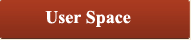
<style>
.page{position:relative;width:191px;height:40px}
.page>*{position:absolute;margin:0}
.t1{font:18px "TimesNewRomanPS-BoldMT";color:#ffffff}
</style>
<div class="page">
<p class="t1" style="left:45px;top:10px;width:86px;height:17px">User Space</p>
</div>
